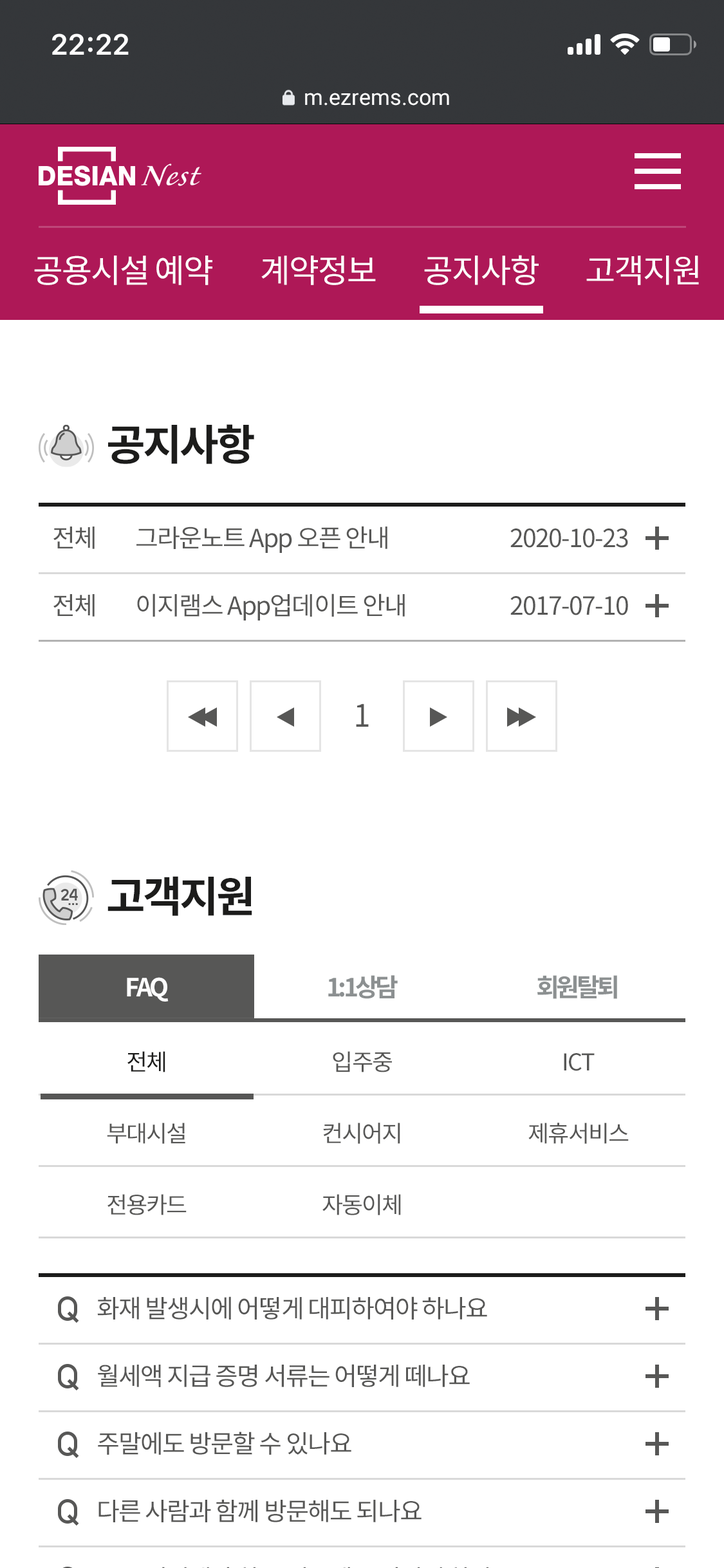
<style>
.page{position:relative;width:724px;height:1568px;background:#ffffff}
.page>*{position:absolute;margin:0}
.t1{font:21.9px "Roboto-Regular";color:#ffffff}
.t2{font:32.8px "NotoSansCJKkr-Regular";letter-spacing:-0.04em;color:#ffffff}
.t3{font:42.5px "NotoSansCJKkr-Bold";letter-spacing:-0.06em;color:#1c1c1b}
.t4{font:25.1px/67.6px "NotoSansCJKkr-Regular";letter-spacing:-0.05em;color:#575756}
.t5{font:30.9px "NotoSansCJKkr-Regular";letter-spacing:-0.05em;color:#575756}
.t6{font:25.1px "NotoSansCJKkr-Bold";letter-spacing:-0.12em;color:#fefefe}
.t7{font:25.1px "NotoSansCJKkr-Bold";letter-spacing:-0.12em;color:#8c9091}
.t8{font:23.2px "NotoSansCJKkr-Regular";letter-spacing:-0.05em;color:#1c1c1b}
.t9{font:23.2px/71.4px "NotoSansCJKkr-Regular";letter-spacing:-0.05em;color:#575756}
</style>
<div class="page">
<p class="t1" style="left:305px;top:93px;width:144px;height:13px">m.ezrems.com</p>
<p class="t2" style="left:34px;top:256px;width:178px;height:29px">공용시설 예약</p>
<p class="t2" style="left:261px;top:256px;width:115px;height:29px">계약정보</p>
<p class="t2" style="left:424px;top:255px;width:115px;height:30px">공지사항</p>
<p class="t2" style="left:586px;top:256px;width:113px;height:29px">고객지원</p>
<p class="t3" style="left:108px;top:424px;width:146px;height:40px">공지사항</p>
<p class="t4" style="left:53px;top:527px;width:42px;height:90px">전체<br>전체</p>
<p class="t4" style="left:136px;top:526px;width:269px;height:95px">그라운노트 App 오픈 안내<br>이지램스 App업데이트 안내</p>
<p class="t4" style="left:510px;top:528px;width:118px;height:87px">2020-10-23<br>2017-07-10</p>
<p class="t5" style="left:356px;top:704px;width:13px;height:23px">1</p>
<p class="t3" style="left:107px;top:876px;width:145px;height:40px">고객지원</p>
<p class="t6" style="left:127px;top:977px;width:42px;height:25px">FAQ</p>
<p class="t7" style="left:328px;top:975px;width:70px;height:24px">1:1상담</p>
<p class="t7" style="left:537px;top:975px;width:80px;height:24px">회원탈퇴</p>
<p class="t8" style="left:127px;top:1051px;width:38px;height:21px">전체</p>
<p class="t9" style="left:322px;top:1051px;width:79px;height:164px;text-align:center">입주중<br>컨시어지<br>자동이체</p>
<p class="t9" style="left:528px;top:1053px;width:101px;height:91px;text-align:center">ICT<br>제휴서비스</p>
<p class="t9" style="left:107px;top:1123px;width:80px;height:92px;text-align:center">부대시설<br>전용카드</p>
</div>
